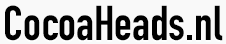
<style>
.page{position:relative;width:226px;height:44px;background:#f9f9f9}
.page>*{position:absolute;margin:0}
.t1{font:48px "DINCondensed-Bold";color:#000000}
</style>
<div class="page">
<p class="t1" style="left:5px;top:5px;width:218px;height:36px">CocoaHeads.nl</p>
</div>
